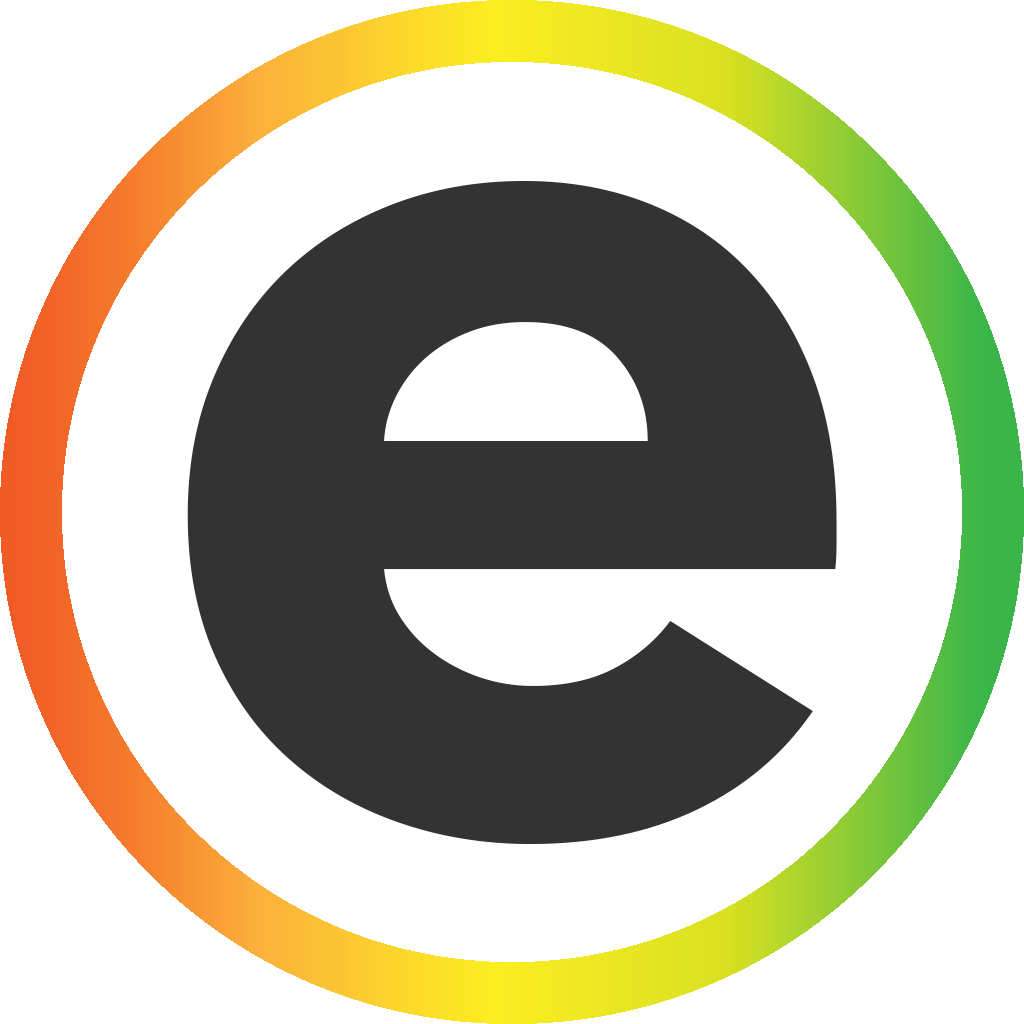
<style>
.page{position:relative;width:1024px;height:1024px;background:#ffffff}
.page>*{position:absolute;margin:0}
.t1{font:1250px "AvenirNext-Bold";color:#333333}
</style>
<div class="page">
<p class="t1" style="left:187px;top:181px;width:650px;height:663px">e</p>
</div>
